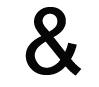
<style>
.page{position:relative;width:99px;height:87px;background:#ffffff}
.page>*{position:absolute;margin:0}
.t1{font:91.7px "ArialMT";letter-spacing:0.025em;color:#060606}
</style>
<div class="page">
<p class="t1" style="left:25px;top:7px;width:57px;height:69px">&amp;</p>
</div>
